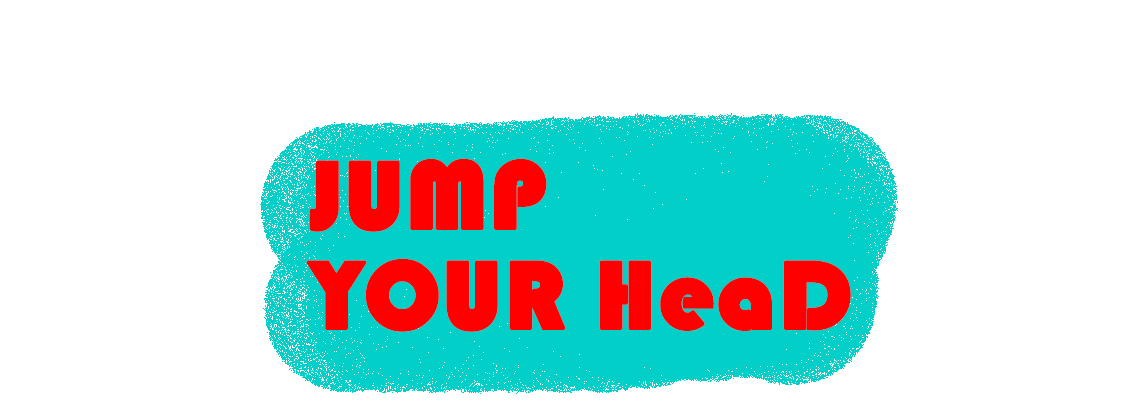
<style>
.page{position:relative;width:1136px;height:400px;background:#ffffff}
.page>*{position:absolute;margin:0}
.t1{font:100px/100px "Bauhaus93";color:#ff0000;font-weight:bold}
</style>
<div class="page">
<p class="t1" style="left:306px;top:158px;width:545px;height:174px">JUMP <br>YOUR HeaD</p>
</div>
